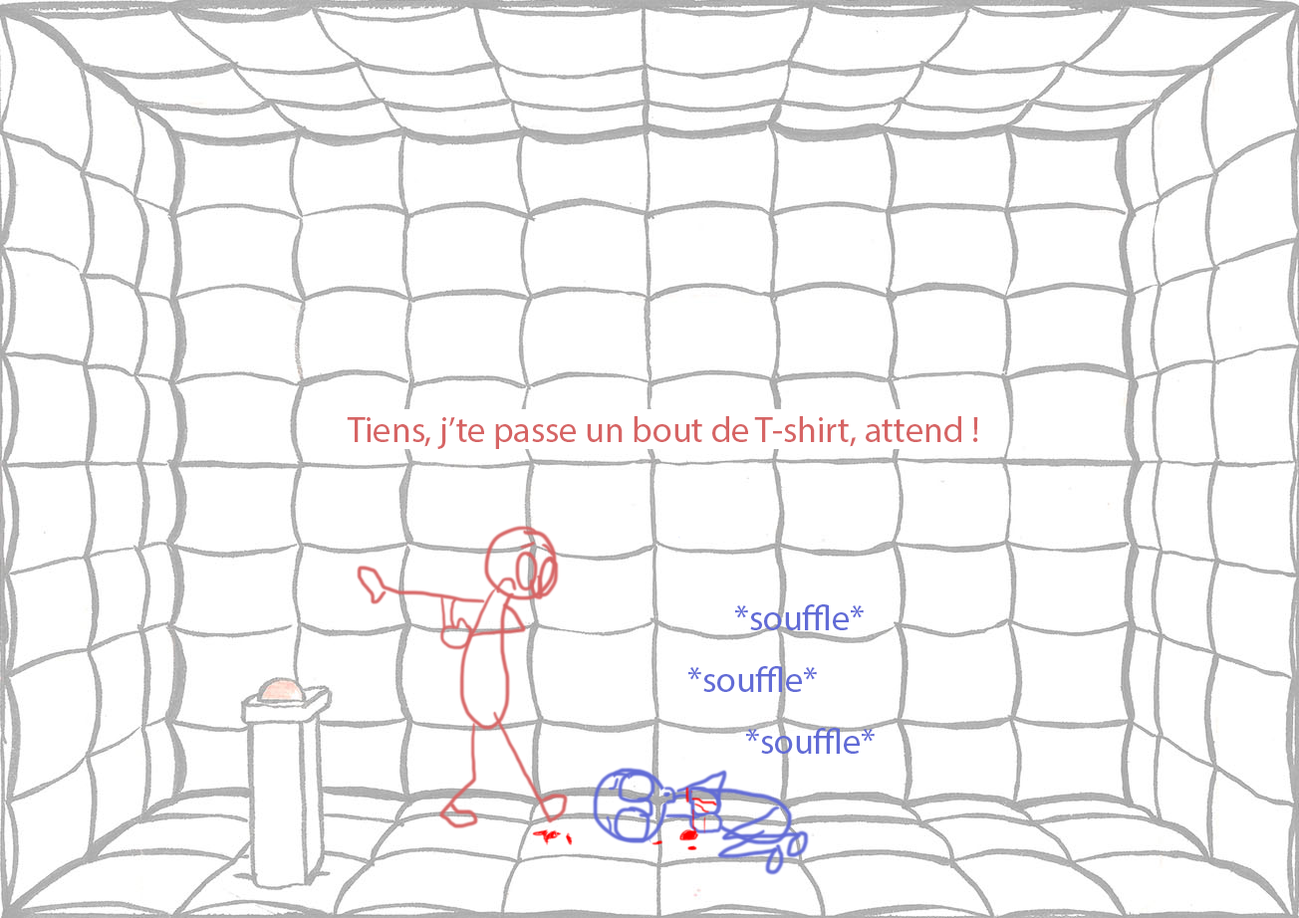
<style>
.page{position:relative;width:1299px;height:918px;background:#ffffff}
.page>*{position:absolute;margin:0}
.t1{font:35.9px "MyriadPro-Regular";color:#d66464}
.t2{font:35.9px "MyriadPro-Regular";color:#616bd6}
</style>
<div class="page">
<p class="t1" style="left:347px;top:416px;width:631px;height:33px">Tiens, j’te passe un bout de T-shirt, attend !</p>
<p class="t2" style="left:735px;top:605px;width:128px;height:25px">*souffle*</p>
<p class="t2" style="left:688px;top:666px;width:129px;height:26px">*souffle*</p>
<p class="t2" style="left:746px;top:728px;width:128px;height:26px">*souffle*</p>
</div>
